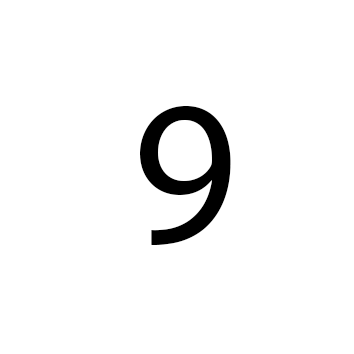
<style>
.page{position:relative;width:354px;height:354px;background:#ffffff}
.page>*{position:absolute;margin:0}
.t1{font:208.3px "MyriadPro-Regular";color:#000000}
</style>
<div class="page">
<p class="t1" style="left:140px;top:105px;width:91px;height:140px">9</p>
</div>
